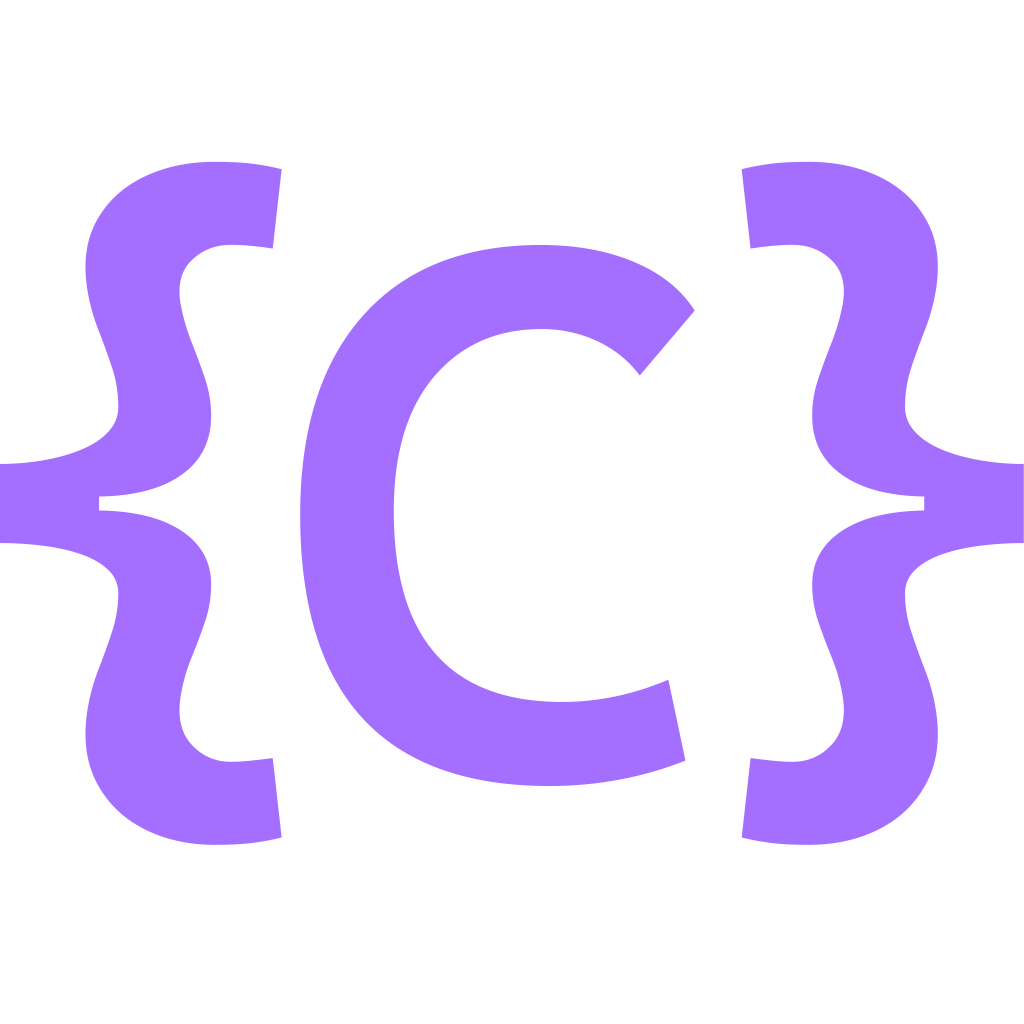
<style>
.page{position:relative;width:1024px;height:1024px;background:#ffffff}
.page>*{position:absolute;margin:0}
.t1{font:759.8px "CascadiaMonoRoman-SemiBold";color:#a46eff}
</style>
<div class="page">
<p class="t1" style="left:0px;top:161px;width:1024px;height:684px">{ }</p>
<p class="t1" style="left:300px;top:245px;width:395px;height:541px">C</p>
</div>
